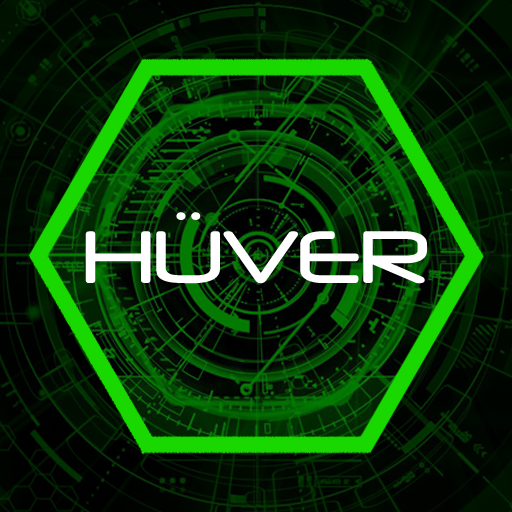
<style>
.page{position:relative;width:512px;height:512px}
.page>*{position:absolute;margin:0}
.t1{font:86.9px "Neuropol";color:#ffffff}
</style>
<div class="page">
<p class="t1" style="left:85px;top:212px;width:342px;height:72px">HÜVER</p>
</div>
